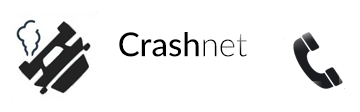
<style>
.page{position:relative;width:360px;height:112px;background:#ffffff}
.page>*{position:absolute;margin:0}
.t1{font:33px "Lato-Medium";color:#000000}
.t2{font:33px "Lato-Light";color:#000000}
.t3{font:33px "Lato-Regular";color:#ffffff}
.t4{font:11px "Zapfino";color:#ffffff}
</style>
<div class="page">
<p class="t1" style="left:119px;top:32px;width:161px;height:25px">Crash<span class="t2">net</span><span class="t3">a</span><span class="t4">C</span></p>
</div>
